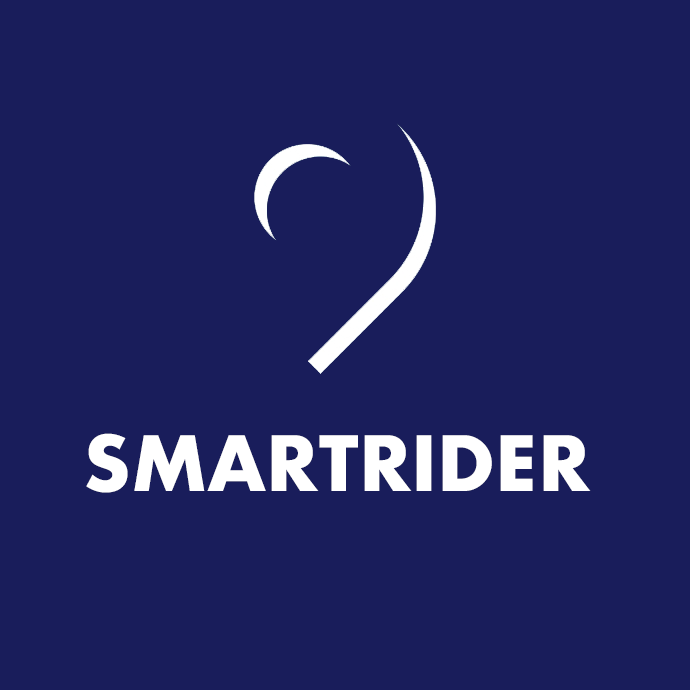
<style>
.page{position:relative;width:690px;height:690px;background:#191d5b}
.page>*{position:absolute;margin:0}
.t1{font:74px "Futura-Bold";color:#ffffff}
</style>
<div class="page">
<p class="t1" style="left:86px;top:433px;width:505px;height:60px">SMARTRIDER</p>
</div>
